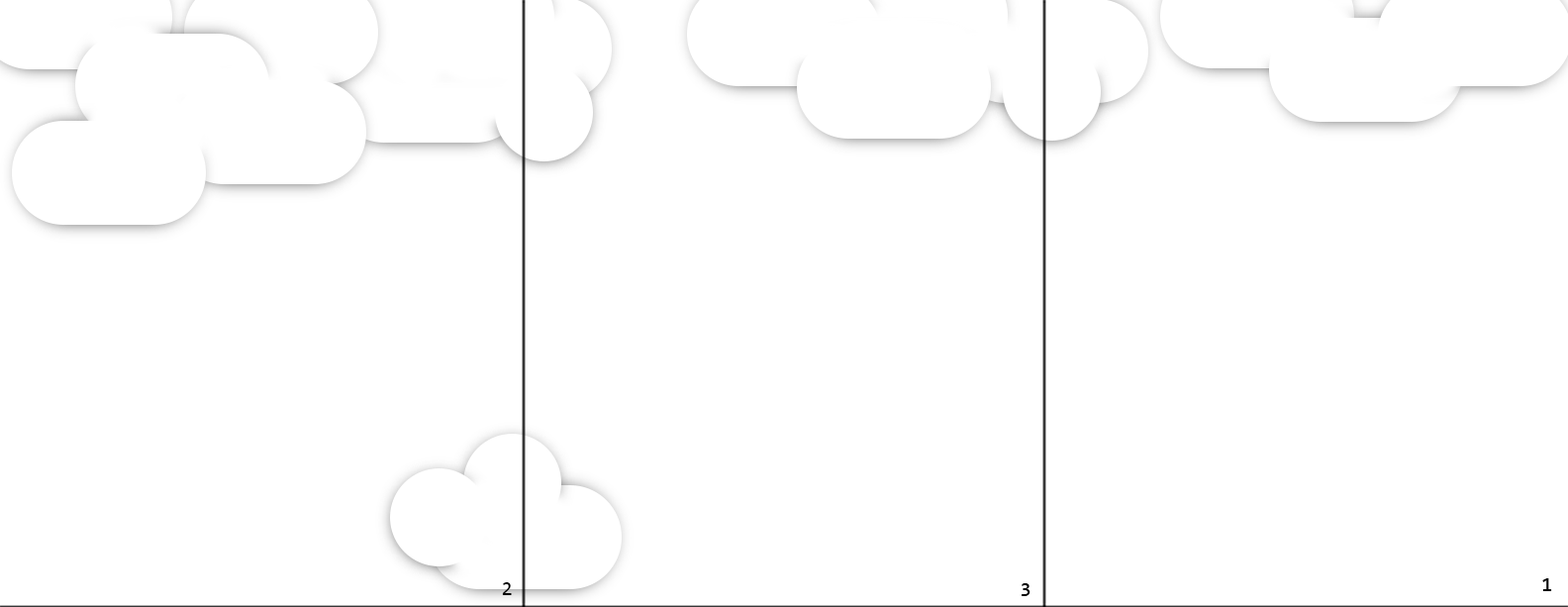
<style>
.page{position:relative;width:1568px;height:607px;background:#ffffff}
.page>*{position:absolute;margin:0}
.t1{font:19.8px "Consolas";color:#000000}
</style>
<div class="page">
<p class="t1" style="left:1542px;top:578px;width:10px;height:13px">1</p>
<p class="t1" style="left:502px;top:582px;width:10px;height:13px">2</p>
<p class="t1" style="left:1022px;top:583px;width:8px;height:13px">3</p>
</div>
